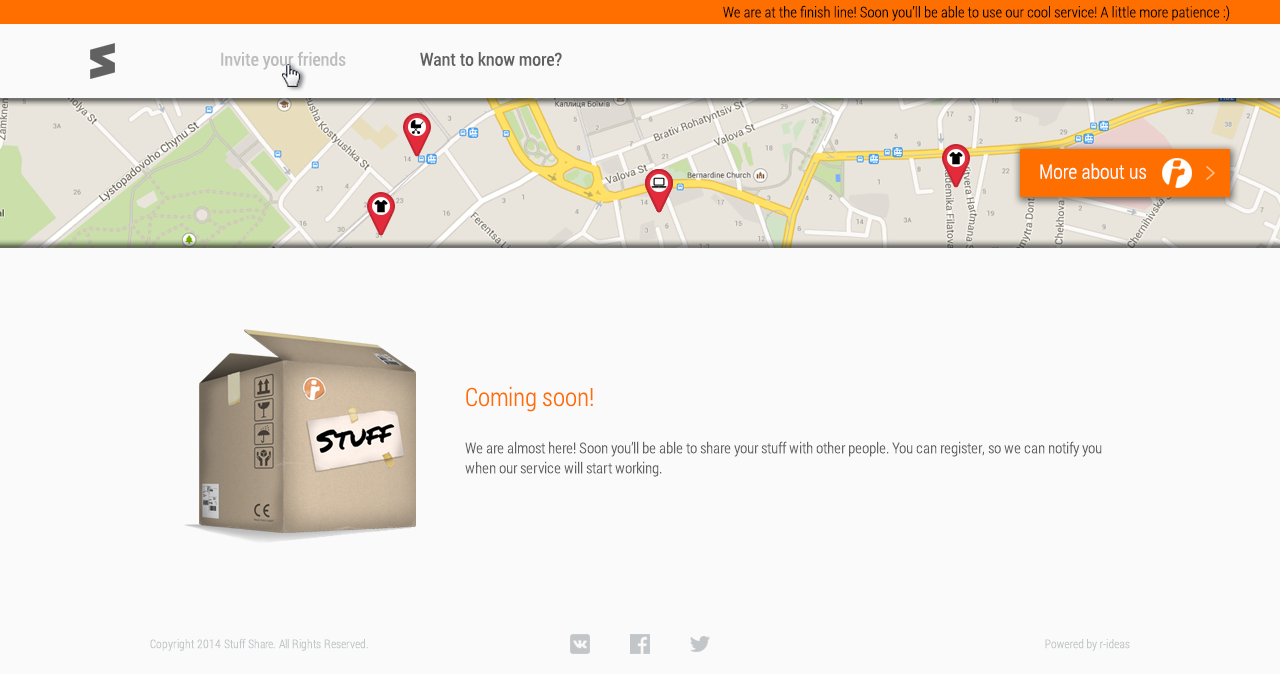
<style>
.page{position:relative;width:1280px;height:674px;background:#fafafa}
.page>*{position:absolute;margin:0}
.t1{font:15px "RobotoCondensed-Light";color:#030303}
.t2{font:18px "RobotoCondensed-Regular";color:#bdbdbd}
.t3{font:18px "RobotoCondensed-Regular";color:#616161}
.t4{font:20px "RobotoCondensed-Light";color:#fefefe}
.t5{font:25px "RobotoCondensed-Light";color:#ff6f00}
.t6{font:15px/20px "RobotoCondensed-Light";color:#616161}
.t7{font:12px "RobotoCondensed-Light";color:#c2c6c8}
</style>
<div class="page">
<p class="t1" style="left:723px;top:5px;width:507px;height:16px">We are at the finish line! Soon you’ll be able to use our cool service! A little more patience :)</p>
<p class="t2" style="left:221px;top:51px;width:125px;height:19px">Invite your friends</p>
<p class="t3" style="left:420px;top:52px;width:142px;height:14px">Want to know more?</p>
<p class="t4" style="left:1040px;top:163px;width:107px;height:16px">More about us</p>
<p class="t5" style="left:466px;top:386px;width:127px;height:26px">Coming soon!</p>
<p class="t6" style="left:465px;top:441px;width:637px;height:36px">We are almost here! Soon you’ll be able to share your stuff with other people. You can register, so we can notify you when our service will start working.</p>
<p class="t7" style="left:150px;top:638px;width:218px;height:13px">Copyright 2014 Stuff Share. All Rights Reserved.</p>
<p class="t7" style="left:1045px;top:639px;width:85px;height:12px">Powered by r-ideas</p>
</div>
